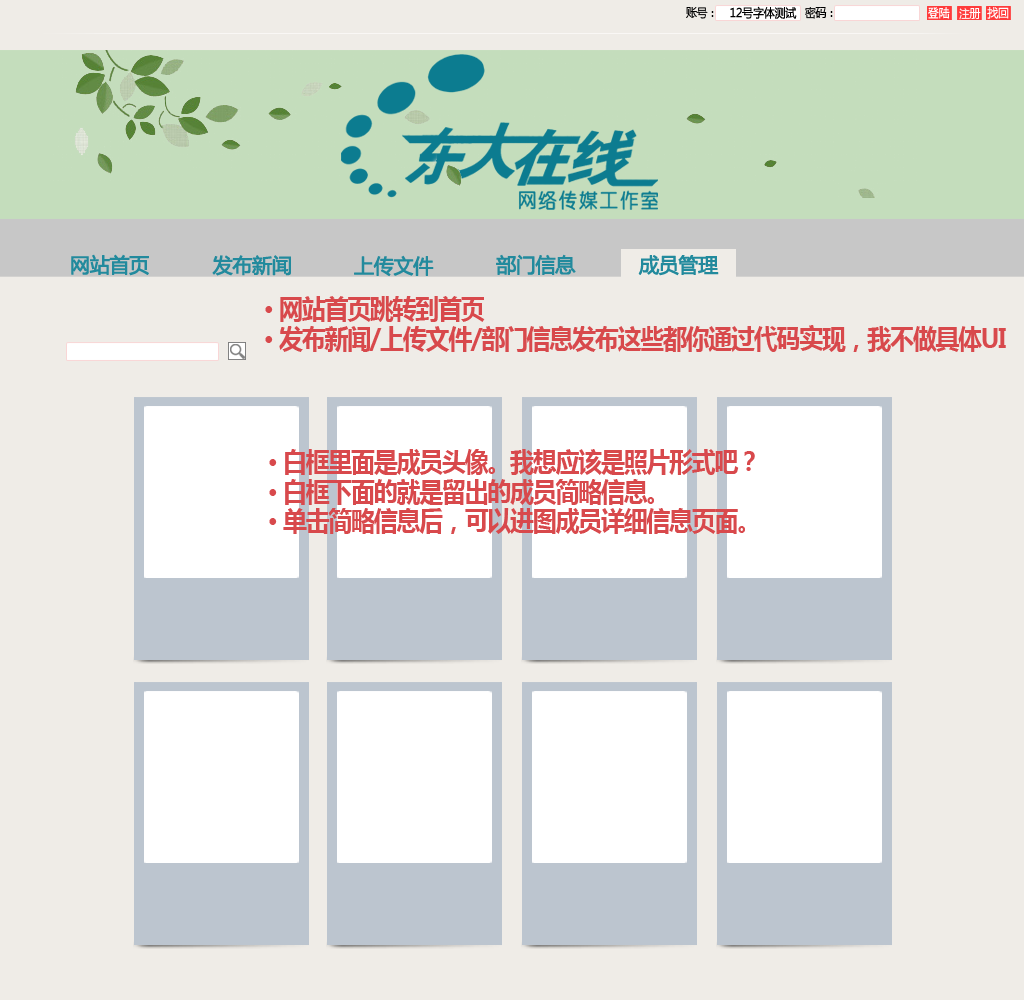
<style>
.page{position:relative;width:1024px;height:1000px;background:#efece7}
.page>*{position:absolute;margin:0}
.t1{font:12px "MicrosoftYaHei";letter-spacing:-0.04em;color:#000000;font-weight:bold;scale:0.91 1}
.t2{font:12px "MicrosoftYaHei";letter-spacing:-0.04em;color:#000000;scale:0.91 1}
.t3{font:20px "MicrosoftYaHei";letter-spacing:-0.04em;color:#228a9d;font-weight:bold}
.t4{font:26px/29.4px "MicrosoftYaHei-Bold";letter-spacing:-0.04em;color:#d8494c;scale:0.91 1}
</style>
<div class="page">
<p class="t1" style="left:730px;top:6px;width:67px;height:13px">12号字体测试</p>
<p class="t2" style="left:686px;top:7px;width:28px;height:12px">账号：</p>
<p class="t2" style="left:805px;top:7px;width:28px;height:12px">密码：</p>
<p class="t3" style="left:71px;top:254px;width:78px;height:22px">网站首页</p>
<p class="t3" style="left:212px;top:255px;width:79px;height:21px">发布新闻</p>
<p class="t3" style="left:354px;top:255px;width:80px;height:22px">上传文件</p>
<p class="t3" style="left:496px;top:254px;width:80px;height:21px">部门信息</p>
<p class="t3" style="left:638px;top:255px;width:81px;height:21px">成员管理</p>
<p class="t4" style="left:265px;top:296px;width:741px;height:56px">· 网站首页跳转到首页<br>· 发布新闻/上传文件/部门信息发布这些都你通过代码实现，我不做具体UI</p>
<p class="t4" style="left:269px;top:449px;width:486px;height:85px">· 白框里面是成员头像。我想应该是照片形式吧？<br>· 白框下面的就是留出的成员简略信息。<br>· 单击简略信息后，可以进图成员详细信息页面。</p>
</div>
